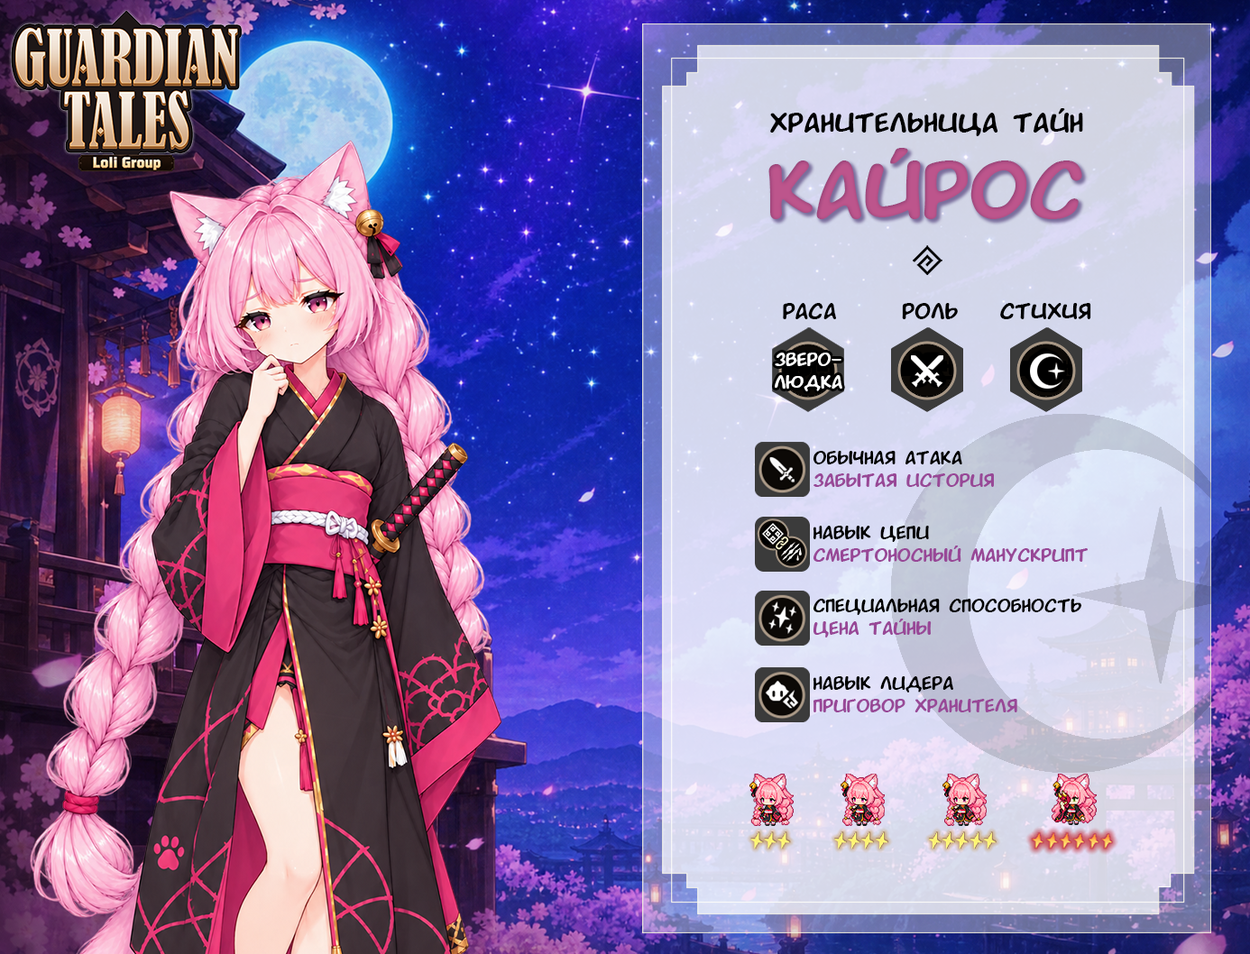
<style>
.page{position:relative;width:1250px;height:954px}
.page>*{position:absolute;margin:0}
.t1{font:28.2px "MPMangaFontBold";color:#000000}
.t2{font:82.7px "MPMangaFontBold";color:#bd558c}
.t3{font:22.5px "MPMangaFontBold";color:#000000}
.t4{font:18.8px "MPMangaFontBold";color:#ffffff}
.t5{font:18.8px "MPMangaFontBold";color:#984897}
.t6{font:18.8px "MPMangaFontBold";color:#000000}
</style>
<div class="page">
<p class="t1" style="left:770px;top:108px;width:313px;height:28px">Хранительница тайн</p>
<p class="t2" style="left:768px;top:148px;width:314px;height:71px">кайрос</p>
<p class="t3" style="left:783px;top:303px;width:53px;height:16px">раса</p>
<p class="t3" style="left:902px;top:303px;width:56px;height:16px">роль</p>
<p class="t3" style="left:1000px;top:303px;width:91px;height:16px">стихия</p>
<p class="t4" style="left:775px;top:353px;width:67px;height:38px;text-align:center">зверо-<br>людка</p>
<p class="t5" style="left:813px;top:451px;width:181px;height:36px"><span class="t6">обычная атака<br></span>Забытая история</p>
<p class="t5" style="left:813px;top:526px;width:275px;height:36px"><span class="t6">навык цепи<br></span>Смертоносный манускрипт</p>
<p class="t6" style="left:813px;top:599px;width:268px;height:39px">специальная способность<br><span class="t5">Цена тайны</span></p>
<p class="t5" style="left:813px;top:676px;width:204px;height:36px"><span class="t6">навык лидера<br></span>Приговор Хранителя</p>
</div>
